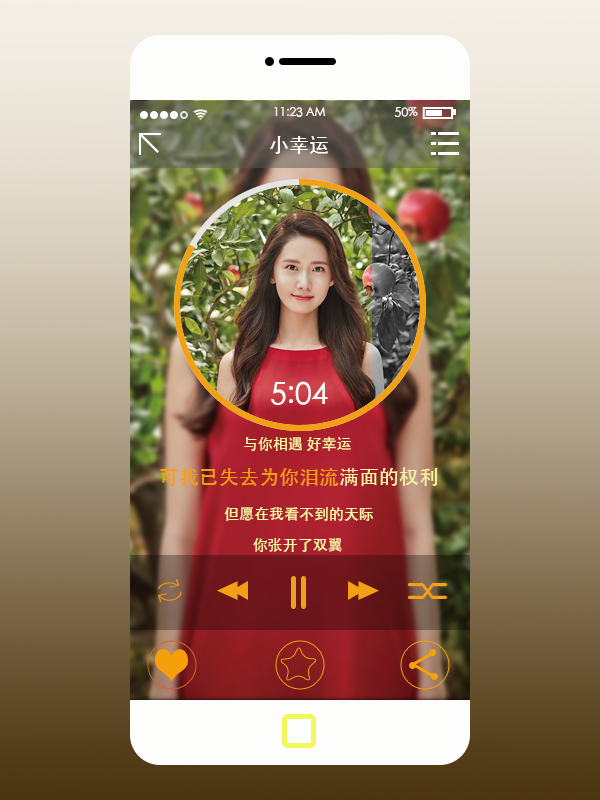
<style>
.page{position:relative;width:600px;height:800px}
.page>*{position:absolute;margin:0}
.t1{font:12px "STHeitiSC-Medium";color:#fefdfc}
.t2{font:11.8px "STHeitiSC-Medium";color:#fefdfc;scale:1.04 1}
.t3{font:19.9px "STHeitiSC-Medium";color:#fefdfc}
.t4{font:29.9px "STHeitiSC-Medium";color:#fcfefe}
.t5{font:15px "STHeitiSC-Medium";color:#f7f6a4}
.t6{font:15px "STHeitiSC-Medium";color:#fcfefe}
.t7{font:20px "STHeitiSC-Medium";color:#f59f0b}
.t8{font:20px "STHeitiSC-Medium";color:#f7f6a4}
</style>
<div class="page">
<p class="t1" style="left:274px;top:107px;width:52px;height:10px">11:23 AM</p>
<p class="t2" style="left:394px;top:107px;width:24px;height:10px">50%</p>
<p class="t3" style="left:270px;top:136px;width:58px;height:18px">小幸运</p>
<p class="t4" style="left:271px;top:381px;width:57px;height:24px">5:04</p>
<p class="t5" style="left:160px;top:436px;width:278px;height:116px"><span class="t6">                     </span>与你相遇 好幸运<br><span class="t7">可我已失去为你泪流</span><span class="t8">满面的权利<br>             </span>但愿在我看不到的天际<br>                         你张开了双翼</p>
</div>
